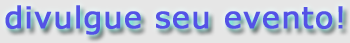
<style>
.page{position:relative;width:350px;height:43px;background:#e6e6e6}
.page>*{position:absolute;margin:0}
.t1{font:30px "Verdana";letter-spacing:0.02em;color:#5452e6;font-weight:bold}
</style>
<div class="page">
<p class="t1" style="left:5px;top:5px;width:338px;height:30px">divulgue seu evento!</p>
</div>
